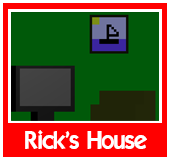
<style>
.page{position:relative;width:170px;height:160px;background:#005909}
.page>*{position:absolute;margin:0}
.t1{font:24px "ELEGANCE";color:#ffffff}
</style>
<div class="page">
<p class="t1" style="left:25px;top:130px;width:122px;height:19px">Rick's House</p>
</div>
